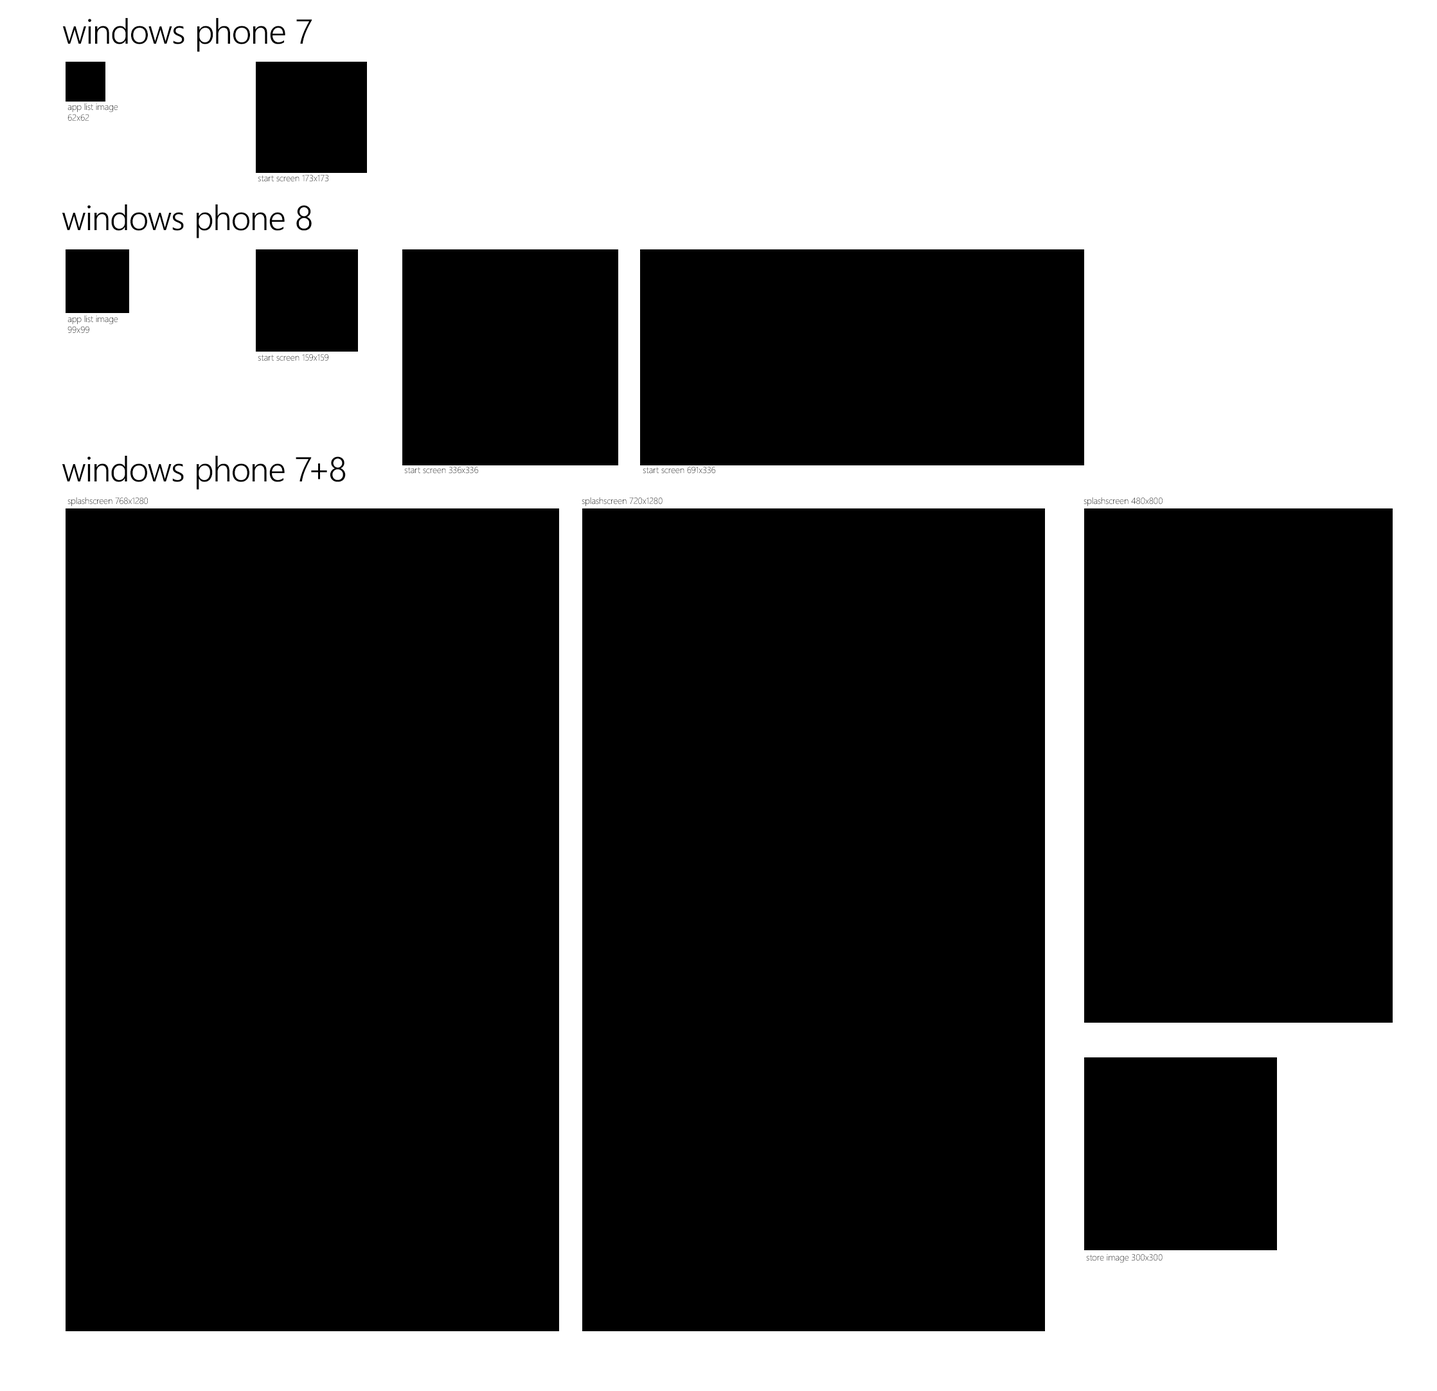
<style>
.page{position:relative;width:1437px;height:1391px;background:#000000}
.page>*{position:absolute;margin:0}
.t1{font:34.7px "SegoeWP-SemiLight";letter-spacing:-0.01em;color:#000000}
.t2{font:9px "SegoeWP-Light";letter-spacing:-0.01em;color:#000000}
.t3{font:9px "SegoeWP-Light";letter-spacing:-0.01em}
</style>
<div class="page">
<p class="t1" style="left:62px;top:18px;width:250px;height:34px">windows phone 7</p>
<p class="t2" style="left:68px;top:103px;width:50px;height:18px">app list image<br>62x62</p>
<p class="t3" style="left:258px;top:175px;width:70px;height:7px">start screen 173x173</p>
<p class="t1" style="left:62px;top:204px;width:250px;height:35px">windows phone 8</p>
<p class="t2" style="left:68px;top:315px;width:50px;height:18px">app list image<br>99x99</p>
<p class="t3" style="left:258px;top:354px;width:70px;height:7px">start screen 159x159</p>
<p class="t1" style="left:62px;top:456px;width:284px;height:34px">windows phone 7+8</p>
<p class="t3" style="left:404px;top:467px;width:75px;height:7px">start screen 336x336</p>
<p class="t3" style="left:643px;top:467px;width:73px;height:7px">start screen 691x336</p>
<p class="t2" style="left:68px;top:497px;width:80px;height:10px">splashscreen 768x1280</p>
<p class="t2" style="left:582px;top:497px;width:81px;height:10px">splashscreen 720x1280</p>
<p class="t2" style="left:1084px;top:497px;width:79px;height:10px">splashscreen 480x800</p>
<p class="t3" style="left:1086px;top:1254px;width:77px;height:9px">store image 300x300</p>
</div>
